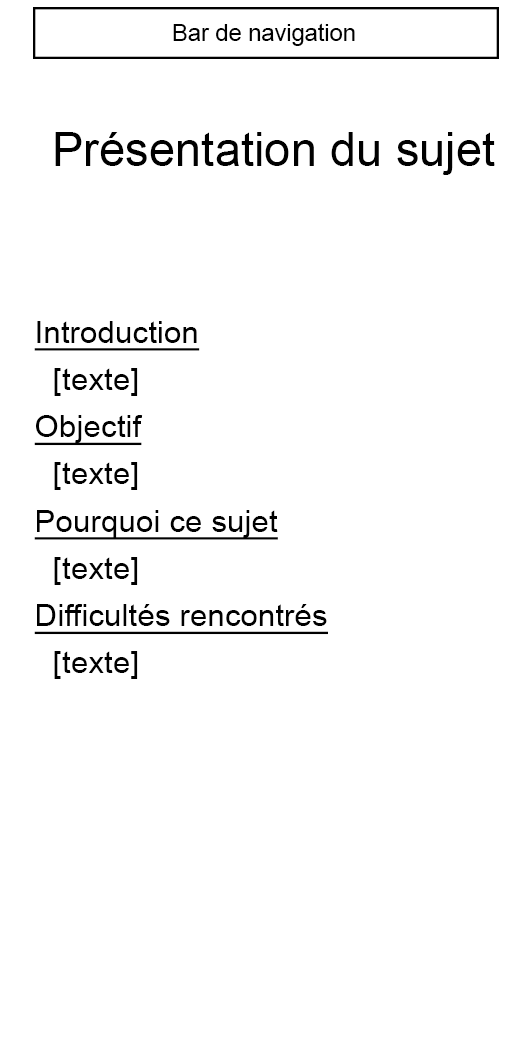
<style>
.page{position:relative;width:531px;height:1063px;background:#ffffff}
.page>*{position:absolute;margin:0}
.t1{font:23.6px "ArialMT";color:#000000}
.t2{font:47.2px "ArialMT";color:#000000}
.t3{font:31.5px/47.2px "ArialMT";color:#000000;text-decoration:underline}
.t4{font:31.5px/47.2px "ArialMT";color:#000000}
</style>
<div class="page">
<p class="t1" style="left:173px;top:23px;width:182px;height:23px">Bar de navigation</p>
<p class="t2" style="left:55px;top:132px;width:440px;height:43px">Présentation du sujet</p>
<p class="t3" style="left:34px;top:321px;width:294px;height:358px">Introduction<br><span class="t4"> [texte]<br></span>Objectif<br><span class="t4"> [texte]<br></span>Pourquoi ce sujet<br><span class="t4"> [texte]<br></span>Difficultés rencontrés<br><span class="t4"> [texte]</span></p>
</div>
